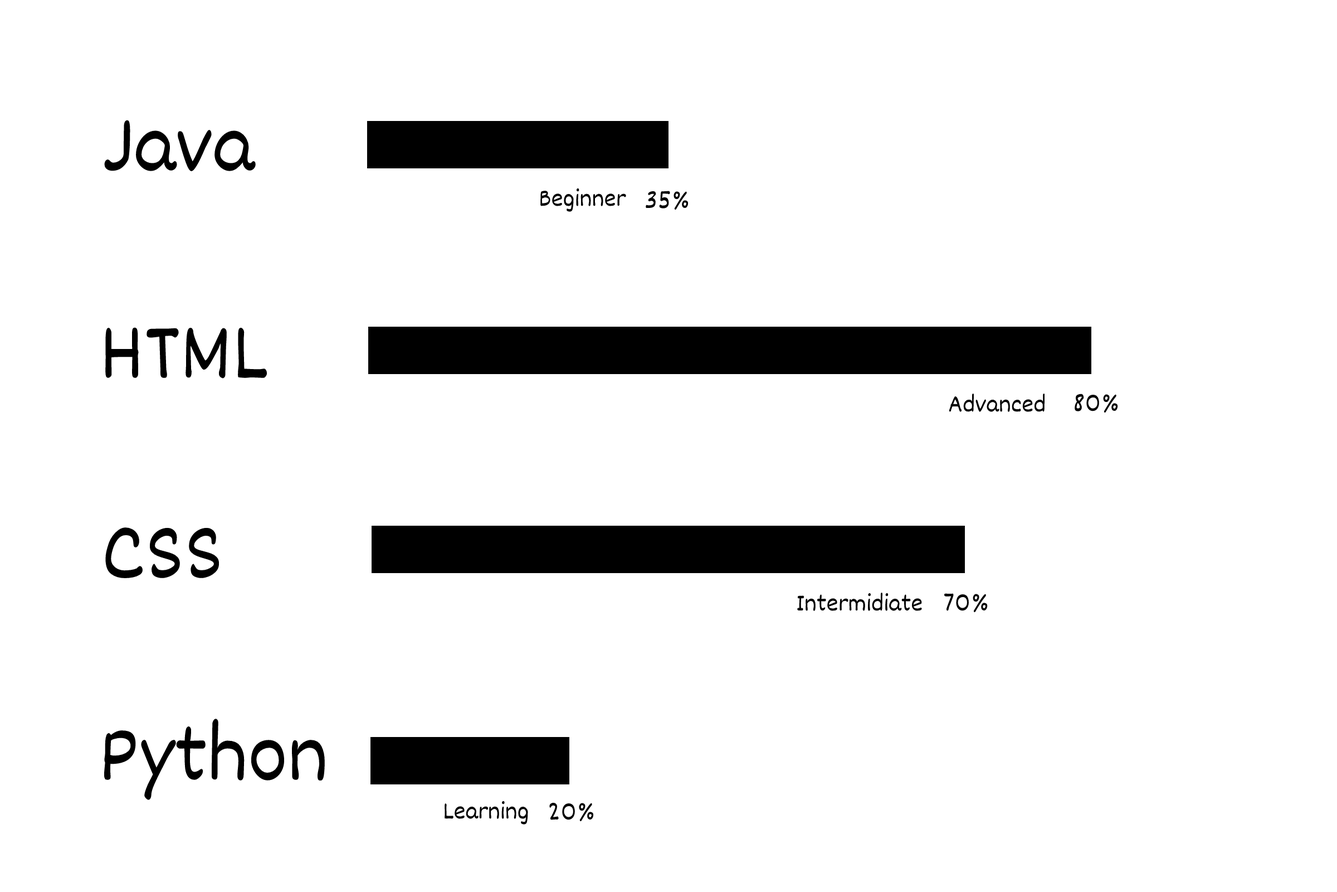
<style>
.page{position:relative;width:1337px;height:892px;background:#ffffff}
.page>*{position:absolute;margin:0}
.t1{font:83.6px "Dekko";color:#000000}
.t2{font:25.1px "Dekko";color:#000000}
</style>
<div class="page">
<p class="t1" style="left:104px;top:120px;width:152px;height:52px">Java</p>
<p class="t2" style="left:541px;top:188px;width:85px;height:24px">Beginner</p>
<p class="t2" style="left:646px;top:191px;width:43px;height:19px">35%</p>
<p class="t1" style="left:105px;top:327px;width:162px;height:51px">HTML</p>
<p class="t2" style="left:949px;top:393px;width:96px;height:19px">Advanced</p>
<p class="t2" style="left:1075px;top:393px;width:43px;height:20px">80%</p>
<p class="t1" style="left:105px;top:527px;width:115px;height:51px">CSS</p>
<p class="t2" style="left:797px;top:592px;width:125px;height:19px">Intermidiate</p>
<p class="t2" style="left:945px;top:593px;width:43px;height:19px">70%</p>
<p class="t1" style="left:104px;top:718px;width:221px;height:82px">Python</p>
<p class="t2" style="left:445px;top:800px;width:83px;height:24px">Learning</p>
<p class="t2" style="left:549px;top:802px;width:45px;height:19px">20%</p>
</div>
